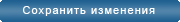
<style>
.page{position:relative;width:180px;height:22px}
.page>*{position:absolute;margin:0}
.t1{font:11px "ArialMT";letter-spacing:0.099em;color:#ffffff}
</style>
<div class="page">
<p class="t1" style="left:23px;top:6px;width:132px;height:10px">Сохранить изменения</p>
</div>
